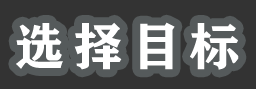
<style>
.page{position:relative;width:256px;height:89px;background:#333333}
.page>*{position:absolute;margin:0}
.t1{font:50.1px "FZCHSJW--GB1-0";letter-spacing:0.16em;color:#ffffff}
</style>
<div class="page">
<p class="t1" style="left:16px;top:22px;width:223px;height:48px">选择目标</p>
</div>
